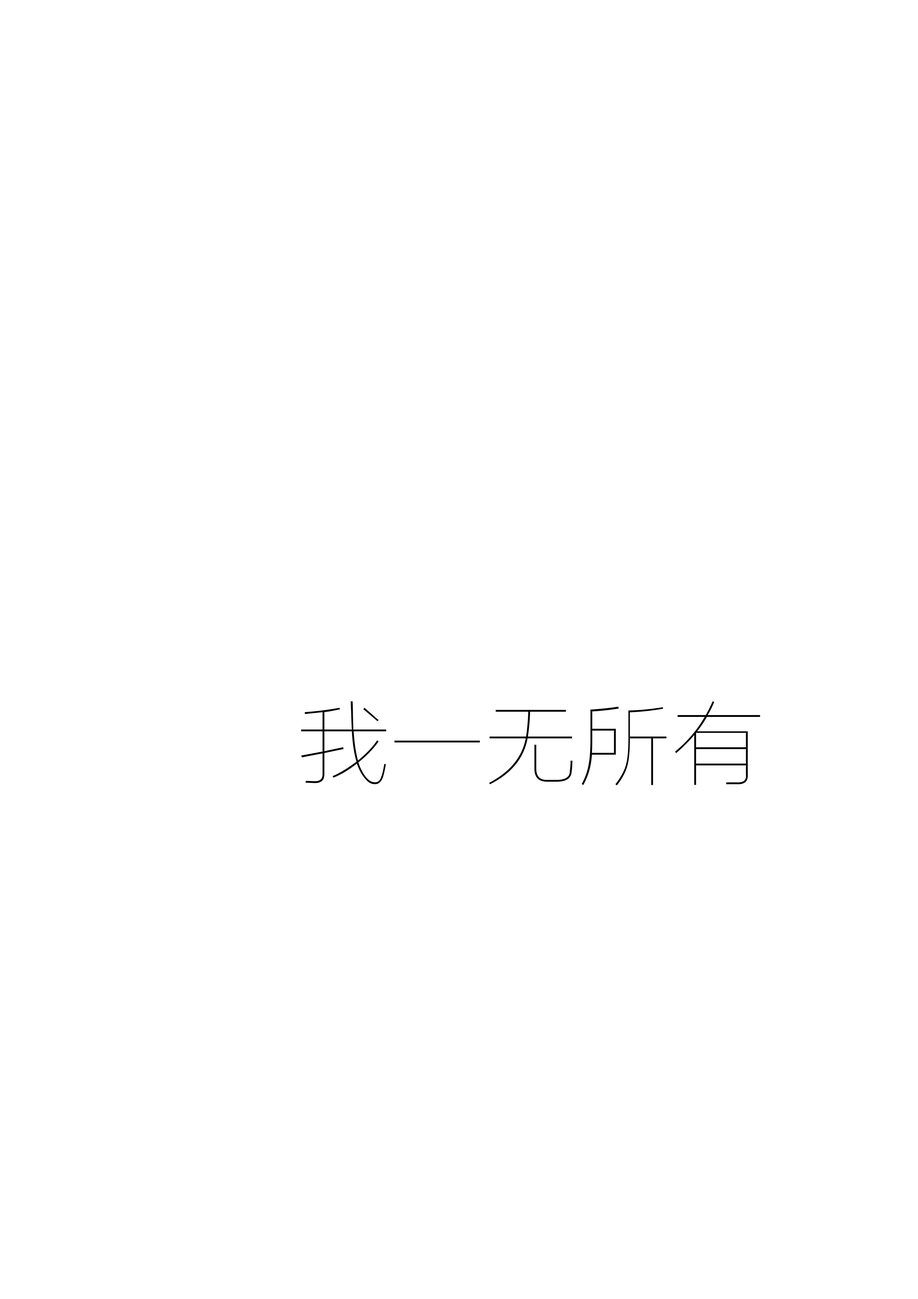
<style>
.page{position:relative;width:918px;height:1299px;background:#ffffff}
.page>*{position:absolute;margin:0}
.t1{font:92.6px "FZLTCXHJW--GB1-0";letter-spacing:0.01em;color:#000000}
</style>
<div class="page">
<p class="t1" style="left:301px;top:701px;width:459px;height:84px">我一无所有</p>
</div>
